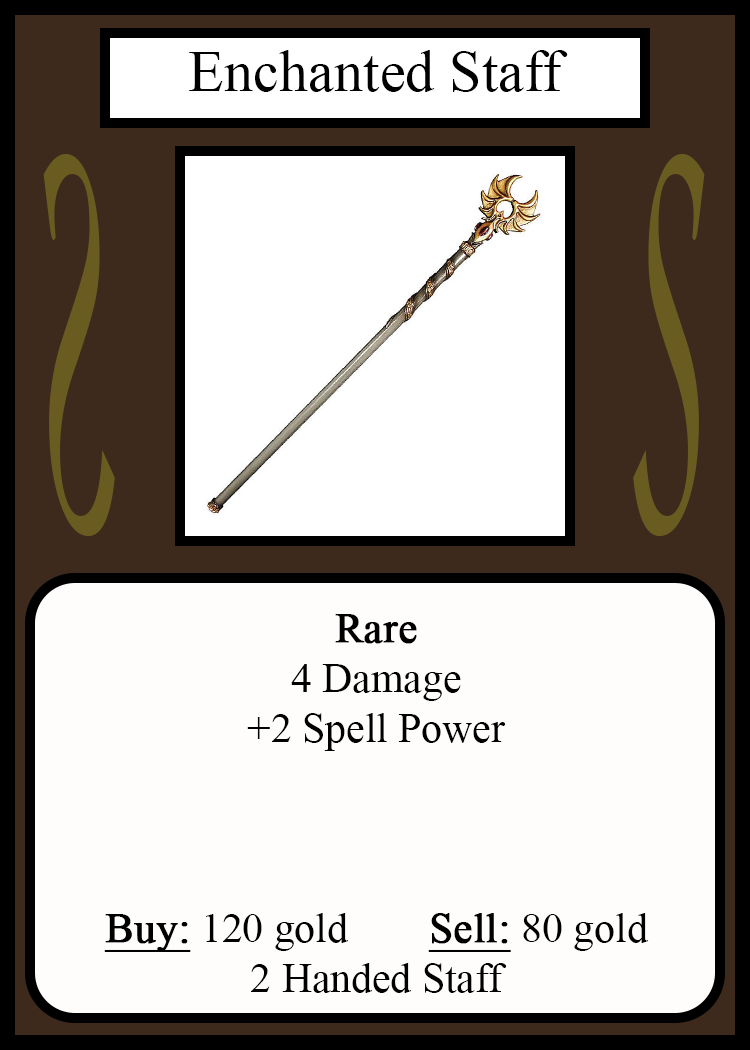
<style>
.page{position:relative;width:750px;height:1050px;background:#fffcfc}
.page>*{position:absolute;margin:0}
.t1{font:58.3px "TimesNewRomanPSMT";color:#010101}
.t2{font:548.5px "Apple-Chancery";color:#6a5c21;scale:0.27 1}
.t3{font:548.2px "Apple-Chancery";color:#6a5c21;scale:0.27 1}
.t4{font:41.7px "TimesNewRomanPSMT";color:#000000}
.t5{font:41.7px "TimesNewRomanPSMT";color:#000000;font-weight:bold}
.t6{font:41.7px "TimesNewRomanPSMT";color:#000000;font-weight:bold;text-decoration:underline}
</style>
<div class="page">
<p class="t1" style="left:189px;top:50px;width:379px;height:42px">Enchanted Staff</p>
<p class="t2" style="left:43px;top:154px;width:72px;height:382px;rotate:180deg">S</p>
<p class="t3" style="left:633px;top:154px;width:72px;height:382px">S</p>
<p class="t4" style="left:104px;top:614px;width:545px;height:379px;text-align:center"><span class="t5">Rare<br></span>4 Damage<br>+2 Spell Power<br><br><br><br><span class="t6">Buy:</span> 120 gold   <span class="t6">Sell:</span> 80 gold<br>2 Handed Staff</p>
</div>
